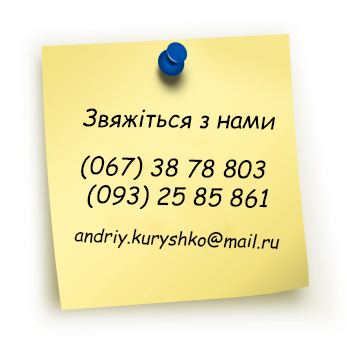
<style>
.page{position:relative;width:347px;height:346px}
.page>*{position:absolute;margin:0}
.t1{font:24px "ComicSansMS-Italic";color:#000000}
.t2{font:18px "ComicSansMS-Italic";color:#000000}
</style>
<div class="page">
<p class="t1" style="left:83px;top:108px;width:192px;height:22px;rotate:1deg">Звяжіться з нами</p>
<p class="t1" style="left:81px;top:155px;width:187px;height:54px;rotate:1deg">(067) 38 78 803 <br> (093) 25 85 861</p>
<p class="t2" style="left:74px;top:228px;width:206px;height:22px;rotate:2deg">andriy.kuryshko@mail.ru</p>
</div>
